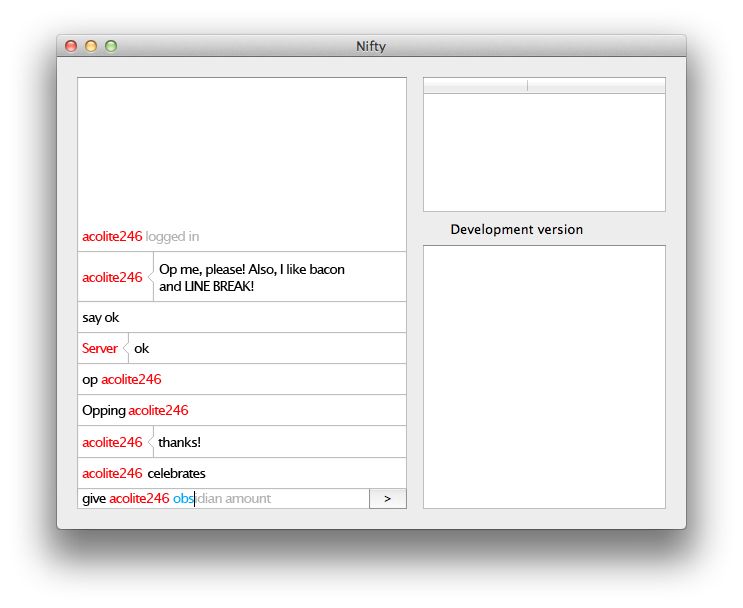
<style>
.page{position:relative;width:743px;height:608px;background:#ffffff}
.page>*{position:absolute;margin:0}
.t1{font:14px "LucidaGrande";letter-spacing:-0.08em;color:#ff0006}
.t2{font:14px "LucidaGrande";letter-spacing:-0.08em;color:#b2b2b2}
.t3{font:14px "LucidaGrande";letter-spacing:-0.08em;color:#000000}
.t4{font:14px "LucidaGrande";letter-spacing:-0.08em;color:#00a9ff}
</style>
<div class="page">
<p class="t1" style="left:82px;top:231px;width:61px;height:10px">acolite246</p>
<p class="t2" style="left:146px;top:231px;width:53px;height:13px">logged in</p>
<p class="t3" style="left:159px;top:264px;width:186px;height:27px">Op me, please! Also, I like bacon<br>and LINE BREAK!</p>
<p class="t1" style="left:82px;top:272px;width:61px;height:10px">acolite246</p>
<p class="t3" style="left:82px;top:312px;width:38px;height:13px">say ok</p>
<p class="t1" style="left:82px;top:343px;width:37px;height:10px">Server</p>
<p class="t3" style="left:134px;top:343px;width:16px;height:10px">ok</p>
<p class="t3" style="left:82px;top:377px;width:16px;height:10px">op</p>
<p class="t1" style="left:101px;top:374px;width:61px;height:10px">acolite246</p>
<p class="t3" style="left:82px;top:405px;width:44px;height:13px">Opping</p>
<p class="t1" style="left:128px;top:405px;width:61px;height:10px">acolite246</p>
<p class="t1" style="left:82px;top:437px;width:61px;height:10px">acolite246</p>
<p class="t3" style="left:158px;top:437px;width:42px;height:10px">thanks!</p>
<p class="t1" style="left:82px;top:468px;width:61px;height:10px">acolite246</p>
<p class="t3" style="left:147px;top:468px;width:59px;height:10px">celebrates</p>
<p class="t3" style="left:82px;top:493px;width:24px;height:13px">give</p>
<p class="t1" style="left:109px;top:493px;width:61px;height:10px">acolite246</p>
<p class="t4" style="left:173px;top:493px;width:21px;height:10px">obs</p>
<p class="t2" style="left:195px;top:493px;width:27px;height:10px">idian</p>
<p class="t2" style="left:225px;top:495px;width:47px;height:8px">amount</p>
</div>
